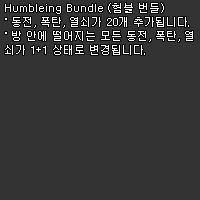
<style>
.page{position:relative;width:200px;height:200px;background:#333333}
.page>*{position:absolute;margin:0}
.t1{font:11px/14px "Dotum";color:#ffffff}
</style>
<div class="page">
<p class="t1" style="left:5px;top:3px;width:188px;height:52px">Humbleing Bundle (험블 번들)<br>˚ 동전, 폭탄, 열쇠가 20개 추가됩니다.<br>˚ 방 안에 떨어지는 모든 동전, 폭탄, 열<br>쇠가 1+1 상태로 변경됩니다.</p>
</div>
